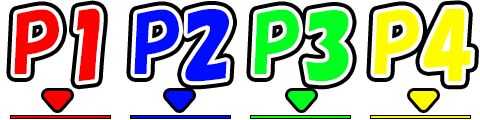
<style>
.page{position:relative;width:480px;height:120px;background:#ffffff}
.page>*{position:absolute;margin:0}
.t1{font:80px "HGPSoeiKakupoptai";color:#ff0000}
.t2{font:80px "HGPSoeiKakupoptai";color:#000cff}
.t3{font:80px "HGPSoeiKakupoptai";color:#00ff1e}
.t4{font:80px "HGPSoeiKakupoptai";color:#fffc00}
</style>
<div class="page">
<p class="t1" style="left:14px;top:8px;width:86px;height:74px">P1</p>
<p class="t2" style="left:134px;top:9px;width:95px;height:73px">P2</p>
<p class="t3" style="left:254px;top:9px;width:95px;height:73px">P3</p>
<p class="t4" style="left:374px;top:8px;width:97px;height:74px">P4</p>
</div>
